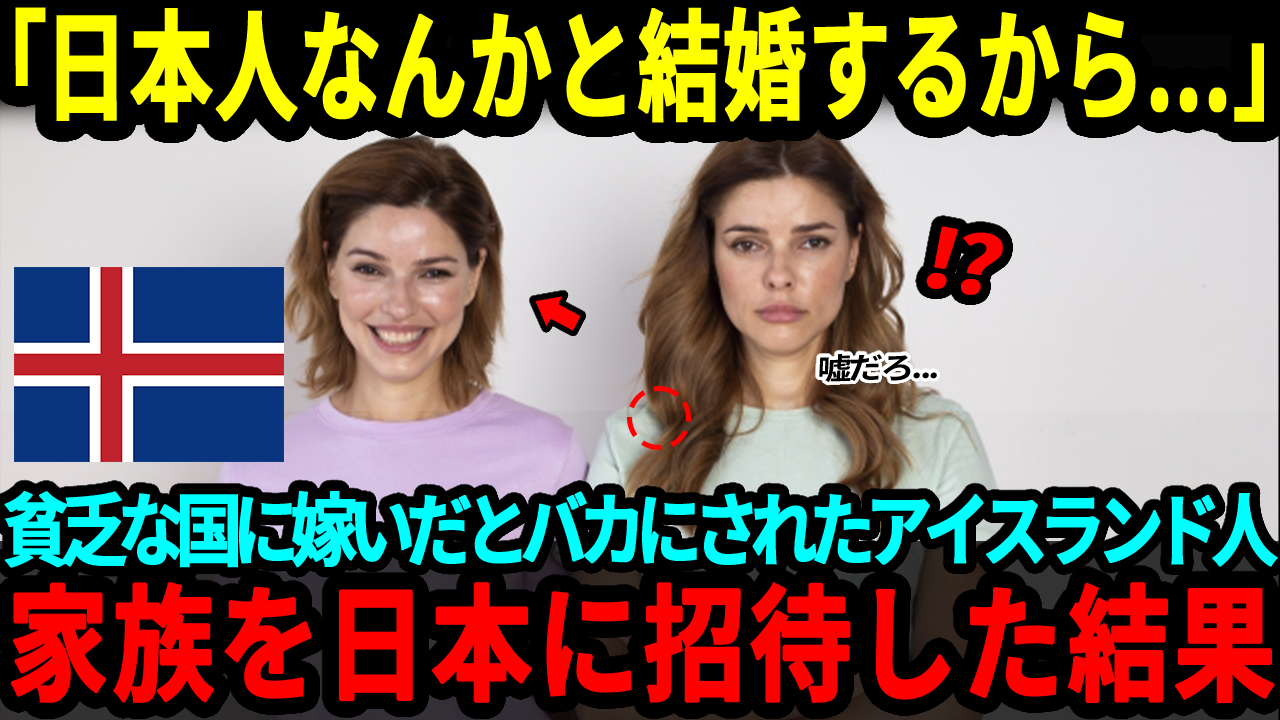
<style>
.page{position:relative;width:1280px;height:720px;background:#000000}
.page>*{position:absolute;margin:0}
.t1{font:120px "SourceHanSansJP-Bold";color:#ffff00;font-weight:bold;scale:0.69 1}
.t2{font:80px "SourceHanSansJP-Bold";letter-spacing:-0.08em;color:#ff0000;font-weight:bold;scale:1.14 1}
.t3{font:30px "SourceHanSansJP-Bold";letter-spacing:-0.08em;color:#000000;scale:1.14 1}
.t4{font:80px "SourceHanSansJP-Bold";letter-spacing:-0.16em;color:#00ffff;font-weight:bold;scale:0.83 1}
.t5{font:125px "SourceHanSansJP-Bold";letter-spacing:0.02em;color:#ff0000;font-weight:bold;scale:0.81 1}
</style>
<div class="page">
<p class="t1" style="left:15px;top:6px;width:1249px;height:117px">「日本人なんかと結婚するから...」</p>
<p class="t2" style="left:926px;top:226px;width:77px;height:69px;rotate:10deg">!?</p>
<p class="t3" style="left:819px;top:354px;width:118px;height:29px;rotate:-1deg">嘘だろ...</p>
<p class="t4" style="left:4px;top:491px;width:1274px;height:77px">貧乏な国に嫁いだとバカにされたアイスランド人</p>
<p class="t5" style="left:10px;top:581px;width:1265px;height:123px">家族を日本に招待した結果</p>
</div>
